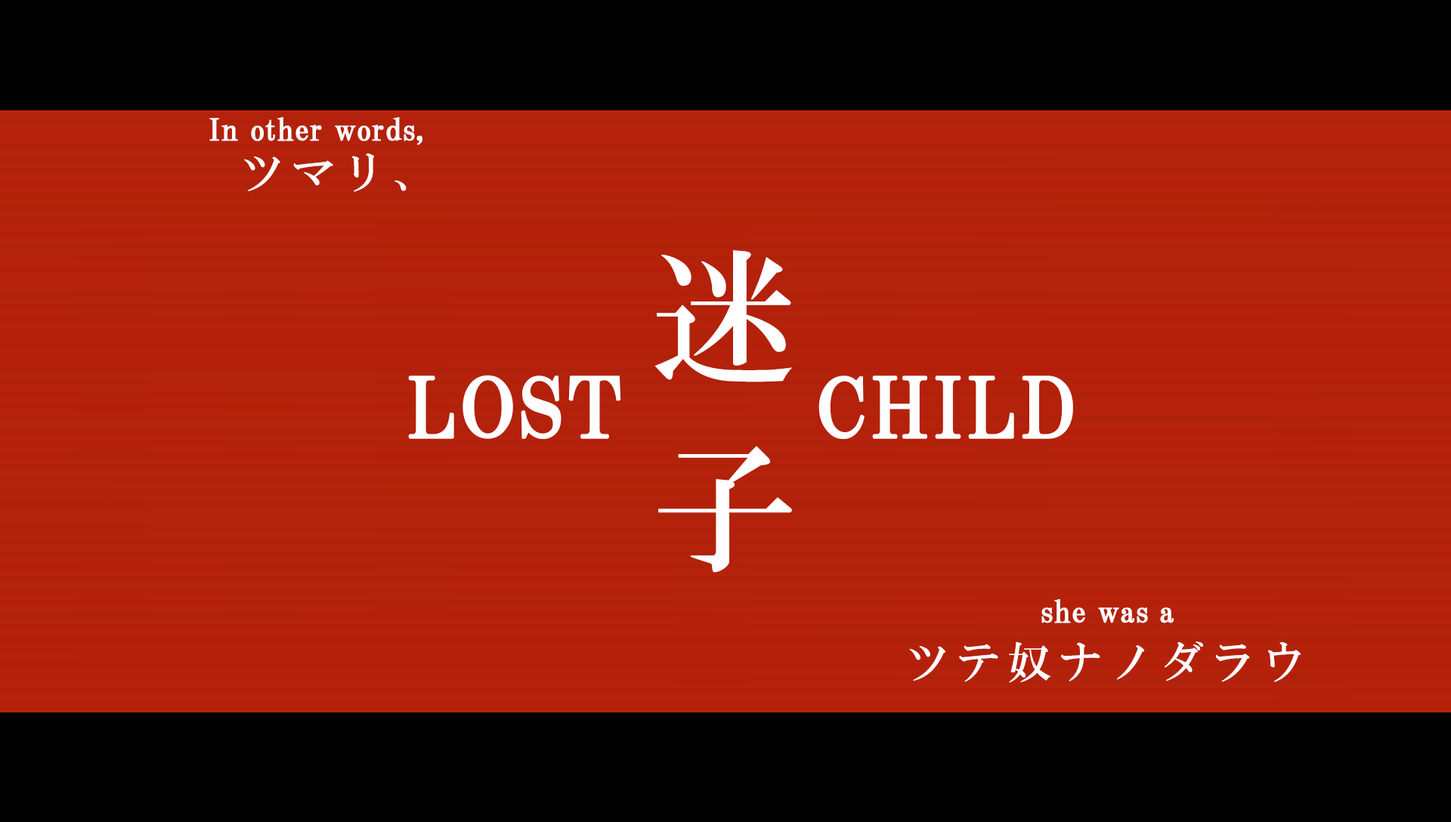
<style>
.page{position:relative;width:1451px;height:822px;background:#000000}
.page>*{position:absolute;margin:0}
.t1{font:30.2px "HGPMinchoB";letter-spacing:0.01em;color:#ffffff;font-weight:bold}
.t2{font:43.8px "HGMinchoB";letter-spacing:0.16em;color:#ffffff}
.t3{font:145.8px/191.9px "HGMinchoB";letter-spacing:0.16em;color:#ffffff}
.t4{font:82.6px "HGPMinchoB";letter-spacing:0.025em;color:#ffffff;font-weight:bold}
</style>
<div class="page">
<p class="t1" style="left:209px;top:117px;width:213px;height:28px">In other words,</p>
<p class="t2" style="left:244px;top:153px;width:162px;height:39px">ツマリ、</p>
<p class="t3" style="left:654px;top:250px;width:138px;height:323px">迷<br>子</p>
<p class="t4" style="left:408px;top:375px;width:665px;height:65px">LOST      CHILD</p>
<p class="t1" style="left:1041px;top:599px;width:132px;height:24px">she was a</p>
<p class="t2" style="left:909px;top:641px;width:391px;height:42px">ツテ奴ナノダラウ</p>
</div>
